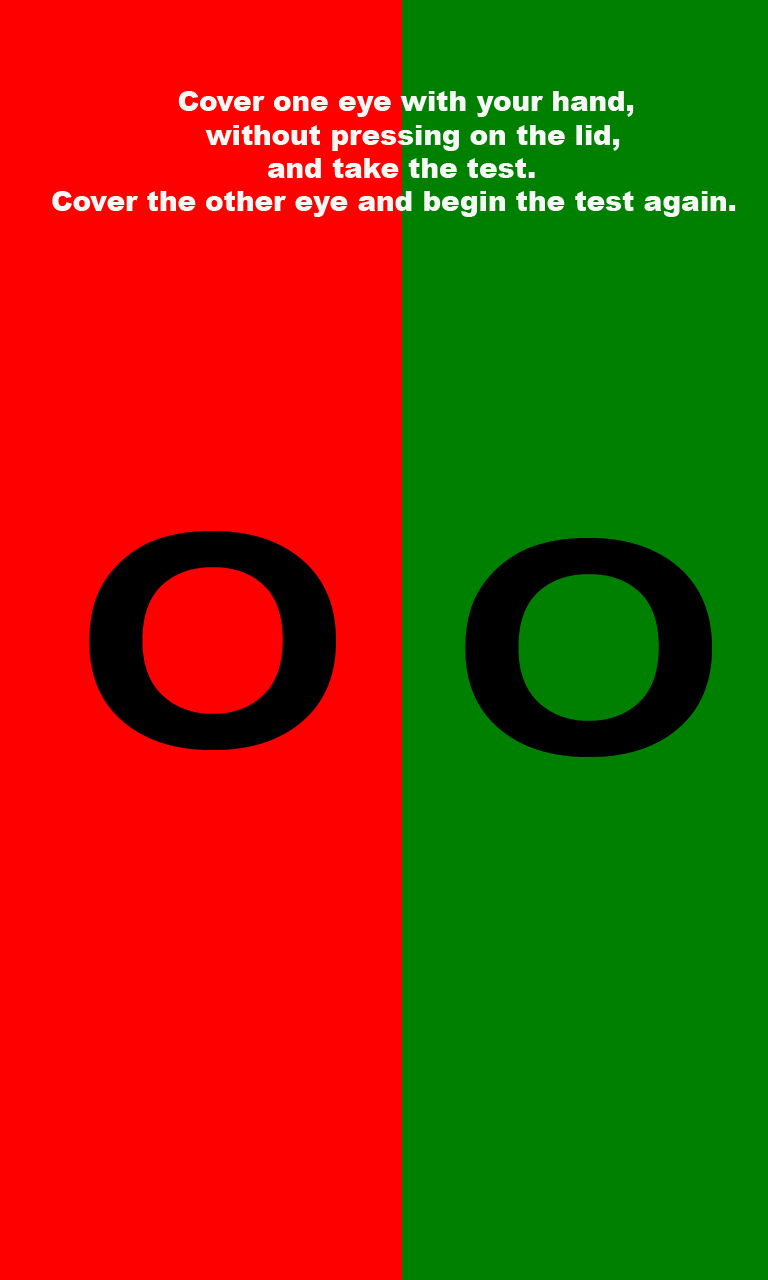
<style>
.page{position:relative;width:768px;height:1280px;background:#fe0000}
.page>*{position:absolute;margin:0}
.t1{font:27.8px "Arial-Black";color:#f6f8f6}
.t2{font:294.8px "Arial-BoldMT";color:#000000;scale:1.2 1}
</style>
<div class="page">
<p class="t1" style="left:52px;top:91px;width:684px;height:126px">Cover one eye with your hand, <br>        without pressing on the lid,  <br>      and take the test. <br>Cover the other eye and begin the test again.</p>
<p class="t2" style="left:89px;top:530px;width:247px;height:220px">O</p>
<p class="t2" style="left:465px;top:537px;width:247px;height:220px">O</p>
</div>
